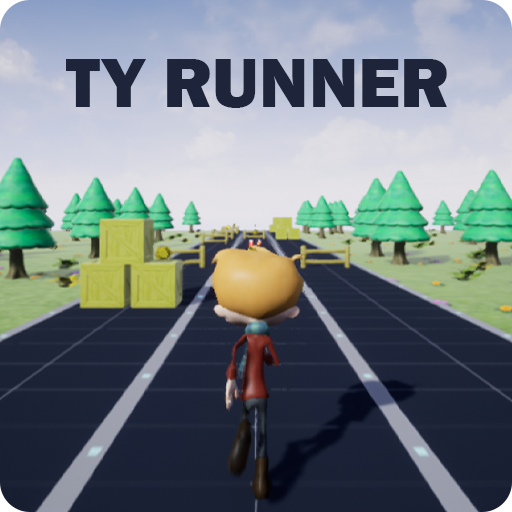
<style>
.page{position:relative;width:512px;height:512px}
.page>*{position:absolute;margin:0}
.t1{font:72px "FranklinGothic-Heavy";color:#1e2539}
</style>
<div class="page">
<p class="t1" style="left:66px;top:59px;width:381px;height:49px">TY RUNNER</p>
</div>
